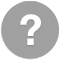
<style>
.page{position:relative;width:60px;height:60px;background:#a0a0a0}
.page>*{position:absolute;margin:0}
.t1{font:42px "HelveticaNeue-Bold";color:#ffffff}
</style>
<div class="page">
<p class="t1" style="left:20px;top:14px;width:21px;height:31px">?</p>
</div>
